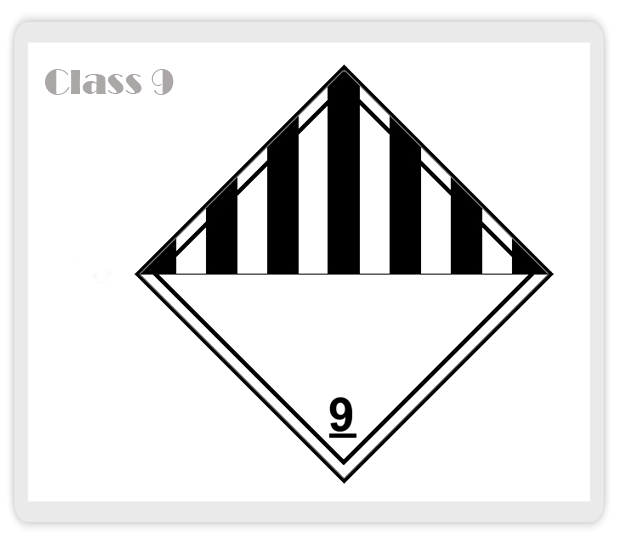
<style>
.page{position:relative;width:618px;height:544px;background:#ffffff}
.page>*{position:absolute;margin:0}
.t1{font:36px "Broadway";color:#aca7a7}
</style>
<div class="page">
<p class="t1" style="left:45px;top:69px;width:129px;height:26px">Class 9</p>
</div>
